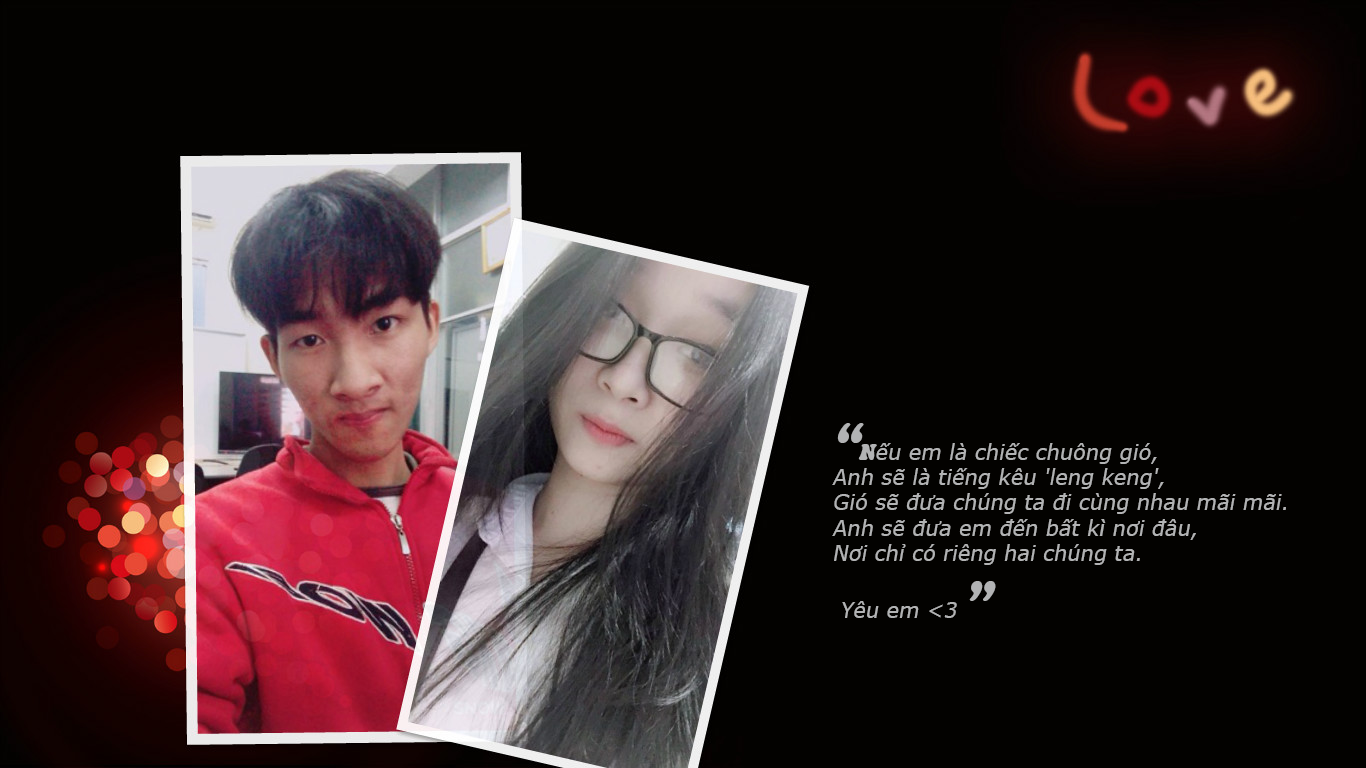
<style>
.page{position:relative;width:1366px;height:768px;background:#030200}
.page>*{position:absolute;margin:0}
.t1{font:21px "Verdana";color:#b2b3b4;font-style:italic}
.t2{font:48px "VNI-Truck";color:#b2b3b4;font-style:italic}
.t3{font:21px "VNI-Truck";color:#b2b3b4;font-style:italic}
</style>
<div class="page">
<p class="t1" style="left:832px;top:423px;width:454px;height:195px"><span class="t2">“</span><span class="t3">N</span>ếu em là chiếc chuông gió, <br>Anh sẽ là tiếng kêu 'leng keng', <br>Gió sẽ đưa chúng ta đi cùng nhau mãi mãi. <br>Anh sẽ đưa em đến bất kì nơi đâu, <br>Nơi chỉ có riêng hai chúng ta.<br> Yêu em &lt;3 <span class="t2">”</span></p>
</div>
